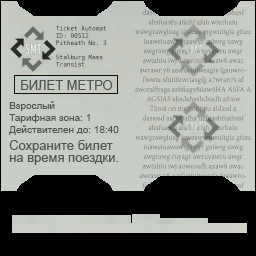
<style>
.page{position:relative;width:256px;height:256px;background:#000000}
.page>*{position:absolute;margin:0}
.t1{font:13px "ArialMT";color:#505450}
.t2{font:10px/12px "ArialMT";color:#505450}
.t3{font:13px/17px "ArialMT";color:#505450}
.t4{font:13px/12px "ArialMT";color:#505450}
</style>
<div class="page">
<p class="t1" style="left:21px;top:80px;width:92px;height:10px">БИЛЕТ МЕТРО</p>
<p class="t2" style="left:9px;top:101px;width:110px;height:64px">Взрослый<br>Тарифная зона: 1<br>Действителен до: 18:40<br><span class="t3">Сохраните билет </span><span class="t4">на время поездки.</span></p>
</div>
